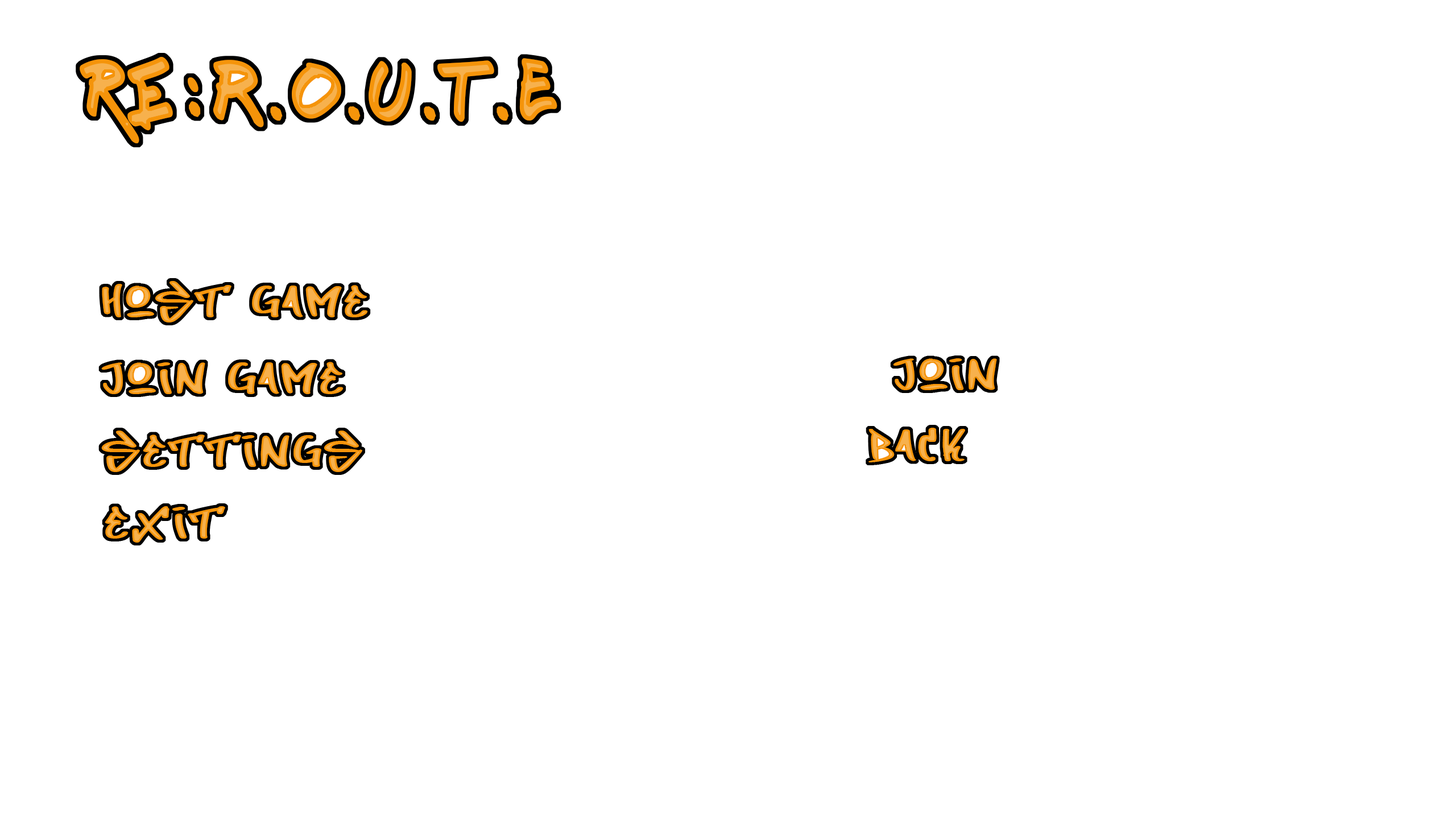
<style>
.page{position:relative;width:1456px;height:819px;background:#ffffff}
.page>*{position:absolute;margin:0}
.t1{font:85.3px "Fresh-Marker";letter-spacing:0.075em;color:#f5940a}
.t2{font:45.5px "DirtyLizard";letter-spacing:0.075em}
</style>
<div class="page">
<p class="t1" style="left:80px;top:57px;width:477px;height:86px">RE:r.o.u.t.e</p>
<p class="t2" style="left:102px;top:281px;width:266px;height:41px">Host Game</p>
<p class="t2" style="left:101px;top:362px;width:243px;height:32px">joIn game</p>
<p class="t2" style="left:893px;top:358px;width:104px;height:32px">join</p>
<p class="t2" style="left:101px;top:431px;width:261px;height:41px">Settings</p>
<p class="t2" style="left:868px;top:428px;width:97px;height:34px">back</p>
<p class="t2" style="left:105px;top:506px;width:120px;height:37px">exit</p>
</div>
